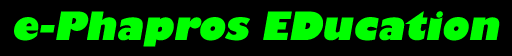
<style>
.page{position:relative;width:512px;height:56px;background:#000000}
.page>*{position:absolute;margin:0}
.t1{font:38px "GillSans-UltraBold";color:#00ff00;font-style:italic}
</style>
<div class="page">
<p class="t1" style="left:14px;top:11px;width:486px;height:36px">e-Phapros EDucation</p>
</div>
